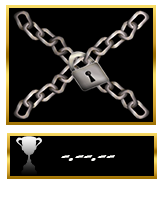
<style>
.page{position:relative;width:163px;height:204px;background:#000000}
.page>*{position:absolute;margin:0}
.t1{font:16px "SFFedora";letter-spacing:-0.005em;color:#fffffc;scale:1.2 1}
</style>
<div class="page">
<p class="t1" style="left:61px;top:155px;width:54px;height:6px">-.--.--</p>
</div>
